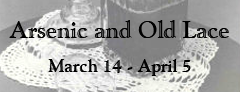
<style>
.page{position:relative;width:240px;height:92px}
.page>*{position:absolute;margin:0}
.t1{font:24px "GoudyHandtooledBT-Regular";color:#000000}
</style>
<div class="page">
<p class="t1" style="left:3px;top:17px;width:233px;height:37px">Arsenic and Old Lace</p>
</div>
